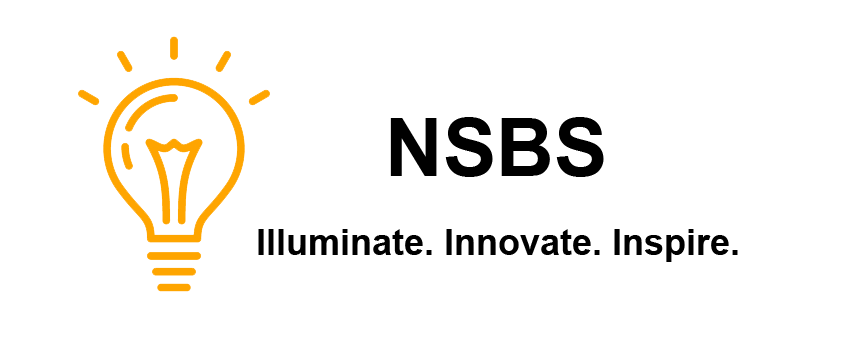
<style>
.page{position:relative;width:851px;height:351px;background:#ffffff}
.page>*{position:absolute;margin:0}
.t1{font:80px "Arial-BoldMT";color:#000000}
.t2{font:36px "Arial-BoldMT";color:#000000}
</style>
<div class="page">
<p class="t1" style="left:390px;top:117px;width:214px;height:60px">NSBS</p>
<p class="t2" style="left:258px;top:229px;width:480px;height:33px">Illuminate. Innovate. Inspire.</p>
</div>
